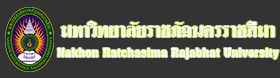
<style>
.page{position:relative;width:280px;height:78px;background:#333333}
.page>*{position:absolute;margin:0}
.t1{font:28px "DSNThaiRat";color:#f8fce3}
.t2{font:18px "DSNThaiRat";color:#f9fce8}
</style>
<div class="page">
<p class="t1" style="left:61px;top:21px;width:214px;height:16px">มหาวิทยาลัยราชภัฏนครราชสีมา</p>
<p class="t2" style="left:57px;top:48px;width:222px;height:11px">Nakhon Ratchasima Rajabhat University</p>
</div>
